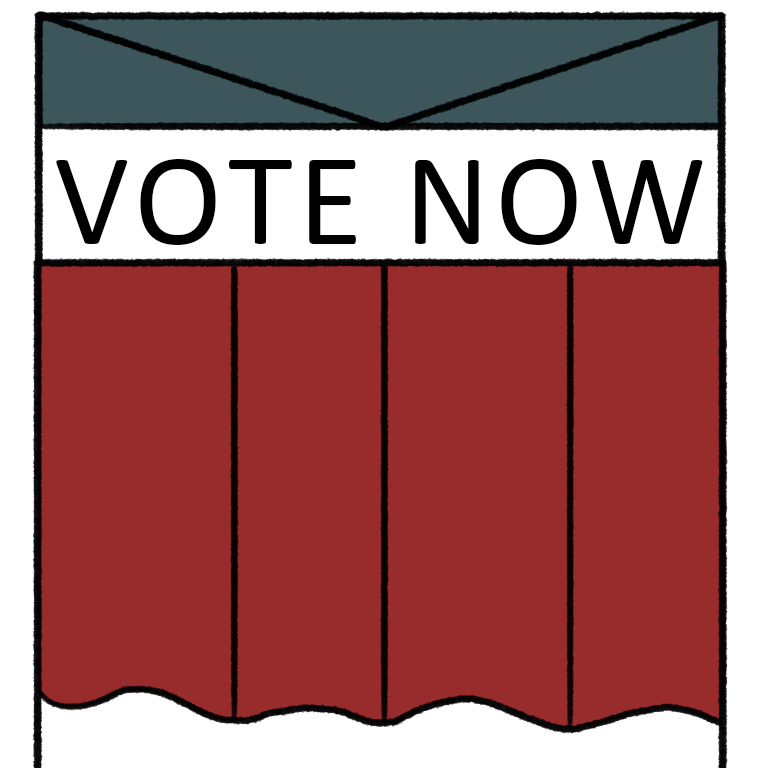
<style>
.page{position:relative;width:768px;height:768px;background:#982c2c}
.page>*{position:absolute;margin:0}
.t1{font:133px "Calibri";letter-spacing:0.04em;color:#000000}
</style>
<div class="page">
<p class="t1" style="left:56px;top:159px;width:647px;height:86px">VOTE NOW</p>
</div>
